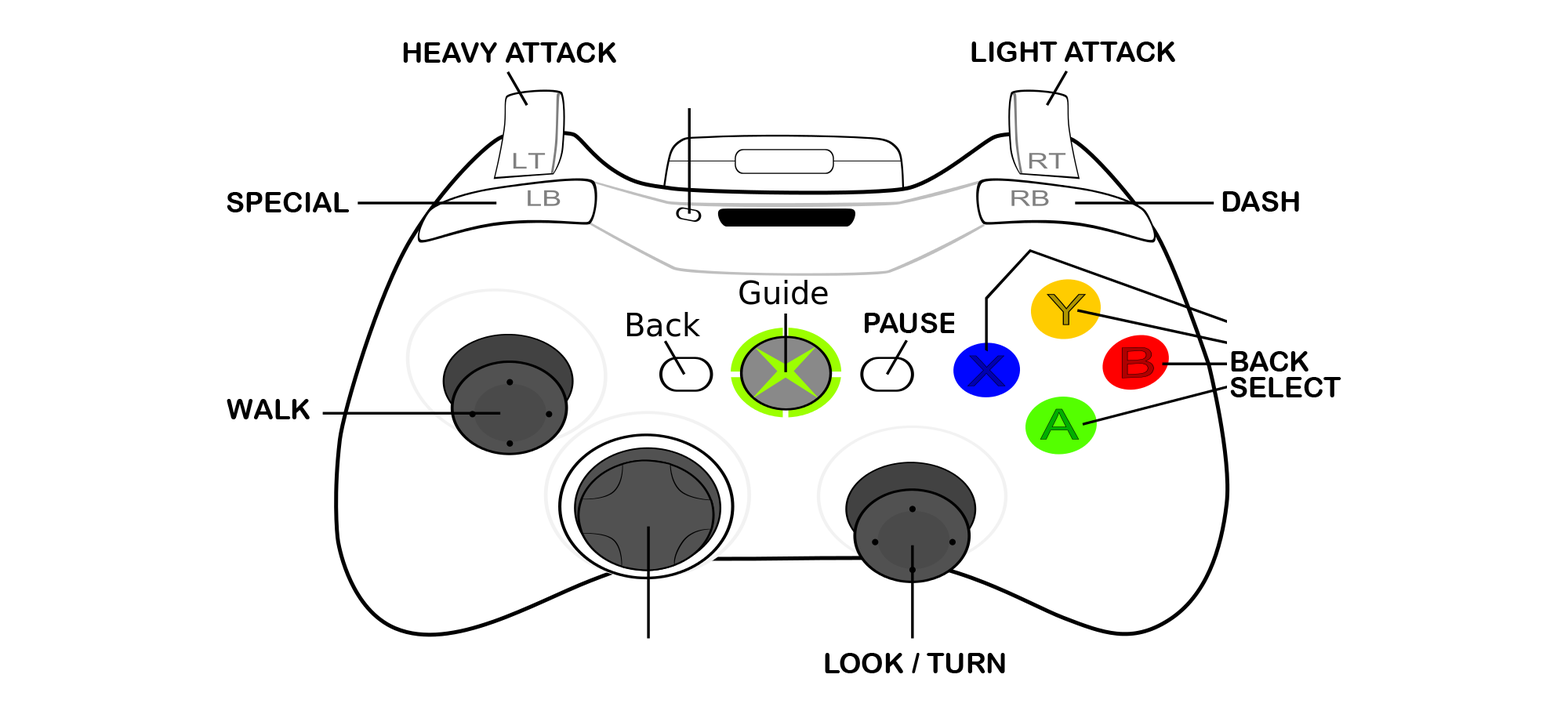
<style>
.page{position:relative;width:1568px;height:725px;background:#ffffff}
.page>*{position:absolute;margin:0}
.t1{font:28.2px "ArialRoundedMTBold";color:#000000}
</style>
<div class="page">
<p class="t1" style="left:971px;top:42px;width:204px;height:20px">LIGHT ATTACK</p>
<p class="t1" style="left:403px;top:42px;width:213px;height:21px">HEAVY ATTACK</p>
<p class="t1" style="left:227px;top:192px;width:123px;height:20px">SPECIAL</p>
<p class="t1" style="left:1222px;top:191px;width:77px;height:21px">DASH</p>
<p class="t1" style="left:864px;top:313px;width:92px;height:20px">PAUSE</p>
<p class="t1" style="left:1231px;top:351px;width:77px;height:21px">BACK</p>
<p class="t1" style="left:1230px;top:377px;width:111px;height:20px">SELECT</p>
<p class="t1" style="left:227px;top:399px;width:83px;height:20px">WALK</p>
<p class="t1" style="left:825px;top:653px;width:180px;height:20px">LOOK / TURN</p>
</div>
